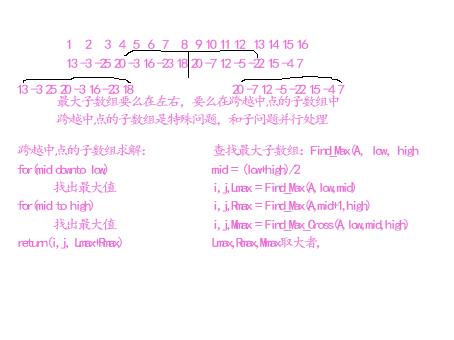
<style>
.page{position:relative;width:454px;height:340px;background:#ffffff}
.page>*{position:absolute;margin:0}
.t1{font:13.3px/14px "¿¬Ìå";letter-spacing:-0.18em;color:#ec6cd8;scale:1.12 1}
.t2{font:13.3px "¿¬Ìå";letter-spacing:-0.18em;color:#ec6cd8;scale:1.12 1}
</style>
<div class="page">
<p class="t1" style="left:66px;top:39px;width:243px;height:29px">1   2   3  4  5  6  7   8  9 10 11 12  13 14 15 16<br>13 -3 -25 20 -3 16 -23 18 20 -7 12 -5 -22 15 -4 7</p>
<p class="t2" style="left:17px;top:84px;width:328px;height:10px">13 -3 25 20 -3 16 -23 18    20 -7 12 -5 -22 15 -4 7</p>
<p class="t1" style="left:56px;top:95px;width:283px;height:31px">最大子数组要么在左右，要么在跨越中点的子数组中<br>跨越中点的子数组是特殊问题，和子问题并行处理</p>
<p class="t1" style="left:17px;top:144px;width:128px;height:105px">跨越中点的子数组求解：<br>for(mid downto low)<br> 找出最大值<br>for(mid to high)<br> 找出最大值<br>return(i,j, Lmax+Rmax)</p>
<p class="t1" style="left:211px;top:144px;width:208px;height:105px">查找最大子数组：Find_Max(A，low，high<br>mid = (low+high)/2<br>i,j,Lmax = Find_Max(A,low,mid)<br>i,j,Rmax = Find_Max(A,mid+1,high)<br>i,j,Mmax = Find_Max_Cross(A,low,mid,high)<br>Lmax,Rmax,Mmax取大者,</p>
</div>
